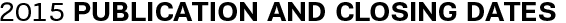
<style>
.page{position:relative;width:566px;height:23px;background:#ffffff}
.page>*{position:absolute;margin:0}
.t1{font:28px "PFEncoreSansPro-Bold";letter-spacing:-0.005em;color:#000000}
.t2{font:28px "PFEncoreSansPro-Regular";letter-spacing:-0.005em;color:#000000}
</style>
<div class="page">
<p class="t1" style="left:0px;top:2px;width:556px;height:19px"><span class="t2">2015 </span>PUBLICATION AND CLOSING DATES</p>
</div>
